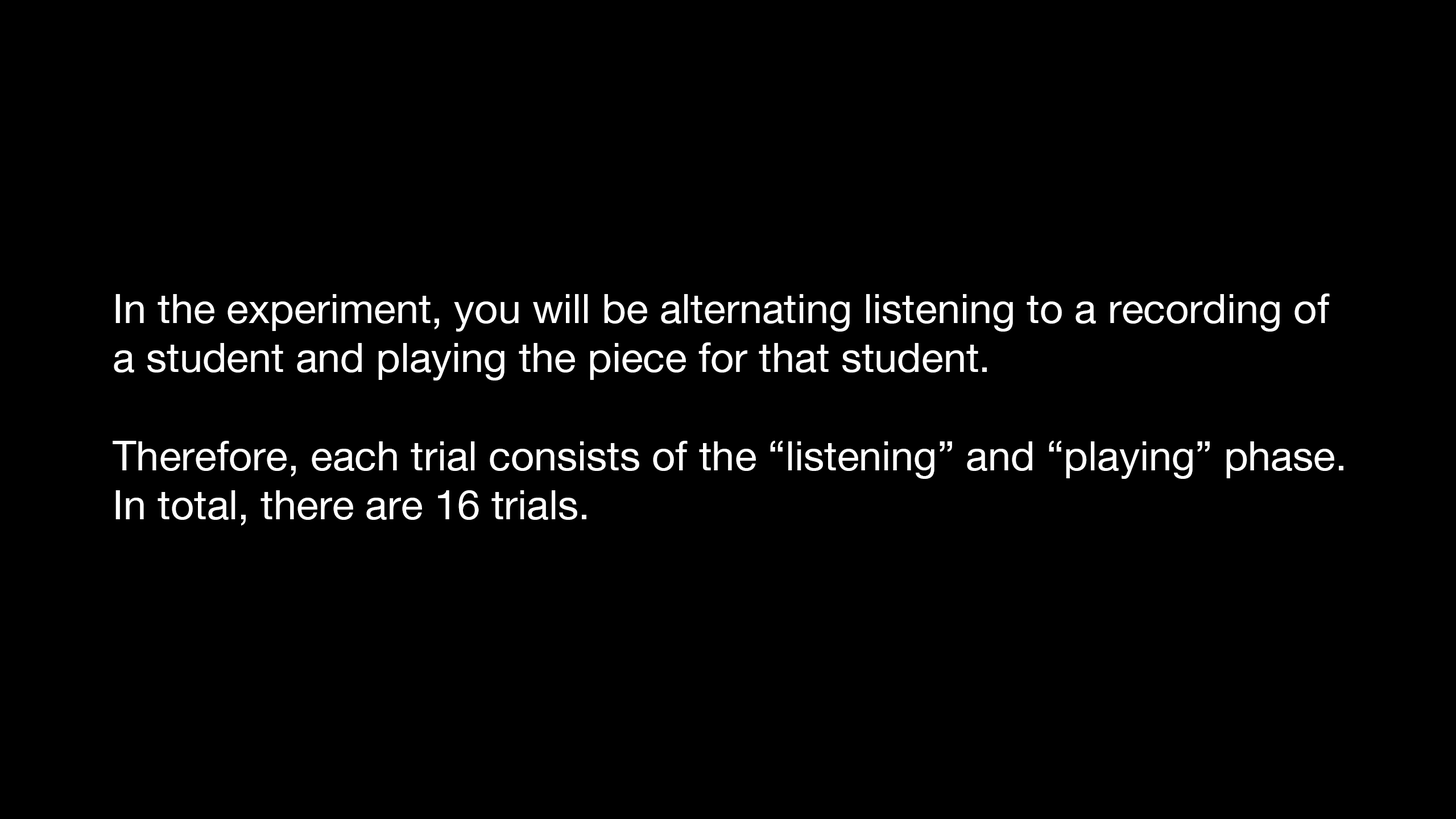
<style>
.page{position:relative;width:1456px;height:819px;background:#000000}
.page>*{position:absolute;margin:0}
.t1{font:40.9px "HelveticaNeue";color:#ffffff}
</style>
<div class="page">
<p class="t1" style="left:113px;top:293px;width:1230px;height:233px">In the experiment, you will be alternating listening to a recording of<br>a student and playing the piece for that student.<br><br>Therefore, each trial consists of the “listening” and “playing” phase.<br>In total, there are 16 trials.</p>
</div>
